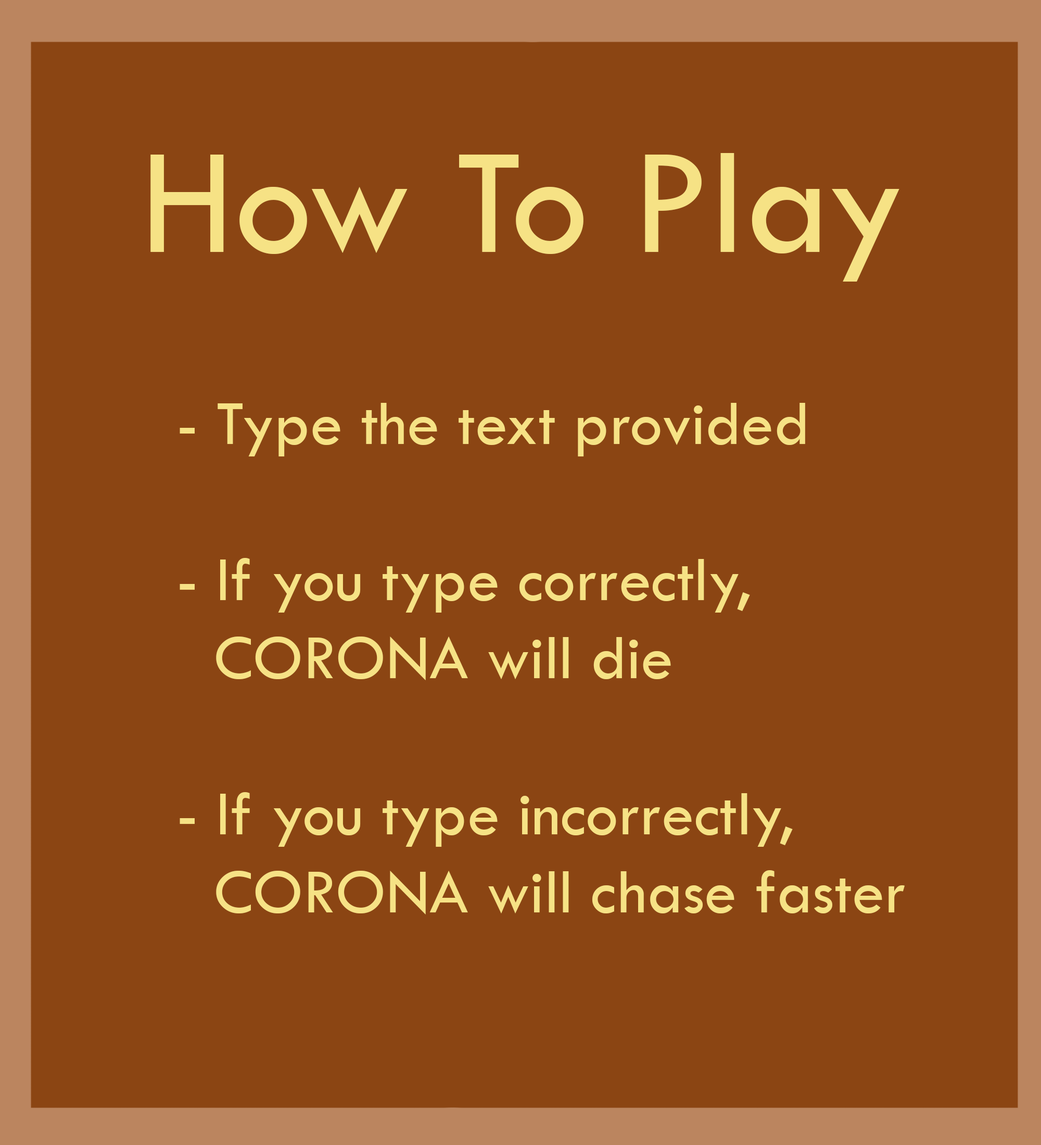
<style>
.page{position:relative;width:1041px;height:1145px;background:#8b4513}
.page>*{position:absolute;margin:0}
.t1{font:156.2px "TwCenMT-Regular";color:#f6e286}
.t2{font:65.1px "TwCenMT-Regular";color:#f6e286}
</style>
<div class="page">
<p class="t1" style="left:150px;top:153px;width:750px;height:129px">How To Play</p>
<p class="t2" style="left:180px;top:403px;width:725px;height:512px">- Type the text provided<br><br>- If you type correctly, <br>  CORONA will die<br><br>- If you type incorrectly,<br>  CORONA will chase faster</p>
</div>
